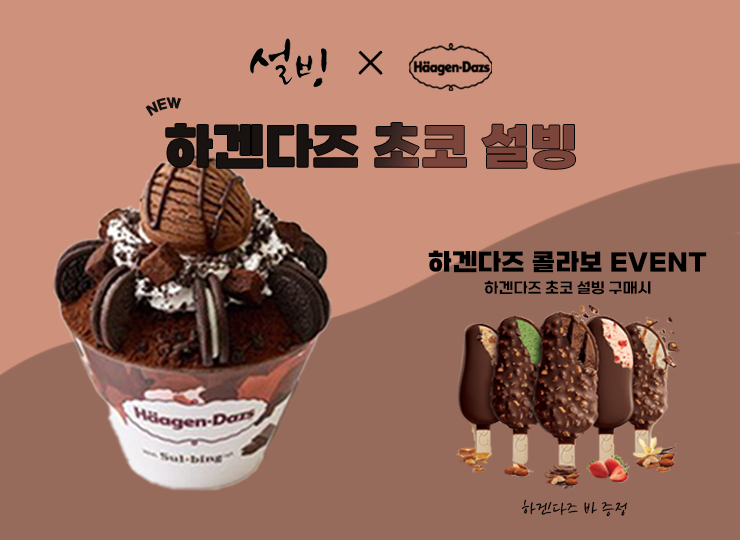
<style>
.page{position:relative;width:740px;height:540px;background:#ce917b}
.page>*{position:absolute;margin:0}
.t1{font:13.8px "SBAggroB";color:#131010;scale:0.78 1}
.t2{font:49.4px "SBAggroB"}
.t3{font:24.6px "SBAggroB";color:#000000}
.t4{font:14.9px "SBAggroM";color:#000000}
.t5{font:20.8px "THEFACESHOP";color:#000000}
</style>
<div class="page">
<p class="t1" style="left:145px;top:97px;width:37px;height:20px;rotate:-14deg">NEW</p>
<p class="t2" style="left:166px;top:123px;width:409px;height:46px">하겐다즈 초코 설빙</p>
<p class="t3" style="left:428px;top:250px;width:279px;height:23px">하겐다즈 콜라보 EVENT</p>
<p class="t4" style="left:484px;top:280px;width:167px;height:15px">하겐다즈 초코 설빙 구매시</p>
<p class="t5" style="left:521px;top:499px;width:107px;height:18px">하겐다즈 바 증정</p>
</div>
